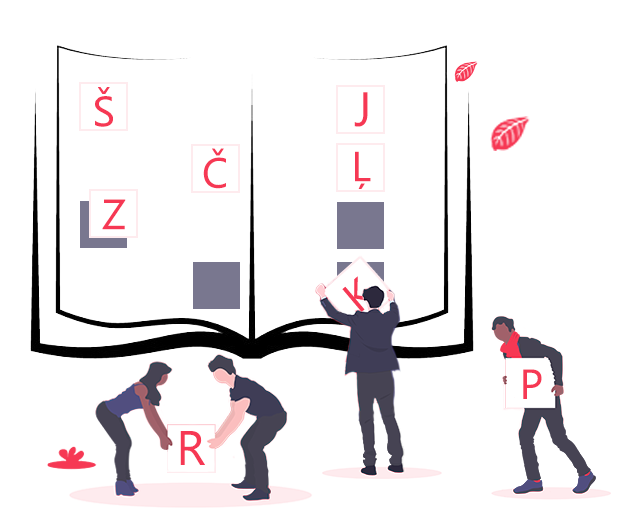
<style>
.page{position:relative;width:626px;height:515px;background:#ffffff}
.page>*{position:absolute;margin:0}
.t1{font:42px "SegoeUI";color:#f63854}
.t2{font:48px "SegoeUI";color:#f63854}
</style>
<div class="page">
<p class="t1" style="left:95px;top:87px;width:18px;height:40px">Š</p>
<p class="t2" style="left:354px;top:92px;width:14px;height:35px">J</p>
<p class="t1" style="left:203px;top:148px;width:23px;height:41px">Č</p>
<p class="t1" style="left:355px;top:151px;width:16px;height:38px">Ļ</p>
<p class="t1" style="left:102px;top:199px;width:24px;height:31px">Z</p>
<p class="t1" style="left:523px;top:369px;width:19px;height:30px">P</p>
<p class="t2" style="left:180px;top:431px;width:25px;height:34px">R</p>
</div>
